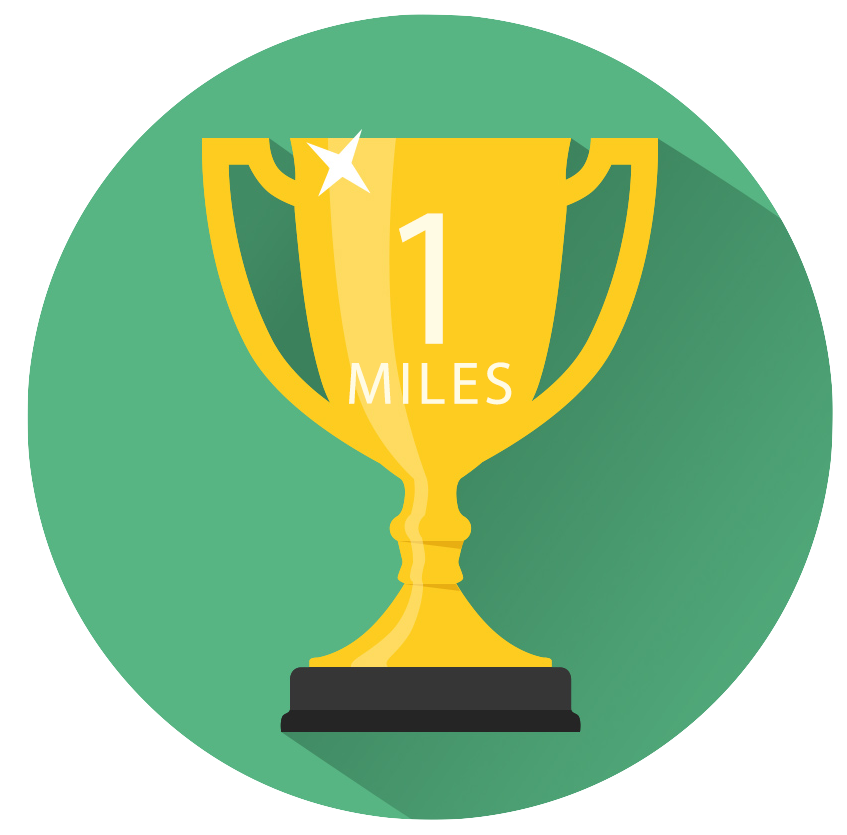
<style>
.page{position:relative;width:847px;height:835px;background:#ffffff}
.page>*{position:absolute;margin:0}
.t1{font:60px/10px "MyriadPro-Regular";letter-spacing:0.075em;color:#fffbe4;text-transform:uppercase}
.t2{font:200px/10px "MyriadPro-Regular";letter-spacing:0.075em;color:#fffbe4;text-transform:uppercase}
</style>
<div class="page">
<p class="t1" style="left:349px;top:213px;width:163px;height:192px;text-align:center"><span class="t2">1<br></span>Miles</p>
</div>
